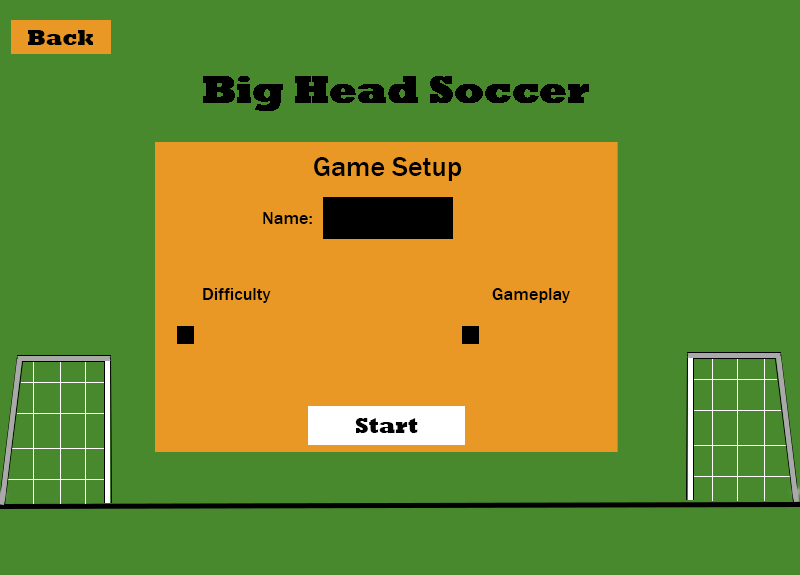
<style>
.page{position:relative;width:800px;height:575px;background:#48892e}
.page>*{position:absolute;margin:0}
.t1{font:28px "FranklinGothic-Medium";color:#000000}
.t2{font:18px "FranklinGothic-Medium";color:#000000}
</style>
<div class="page">
<p class="t1" style="left:314px;top:157px;width:148px;height:24px">Game Setup</p>
<p class="t2" style="left:263px;top:212px;width:49px;height:12px">Name:</p>
<p class="t2" style="left:203px;top:288px;width:68px;height:15px">Difficulty</p>
<p class="t2" style="left:492px;top:288px;width:78px;height:15px">Gameplay</p>
</div>
